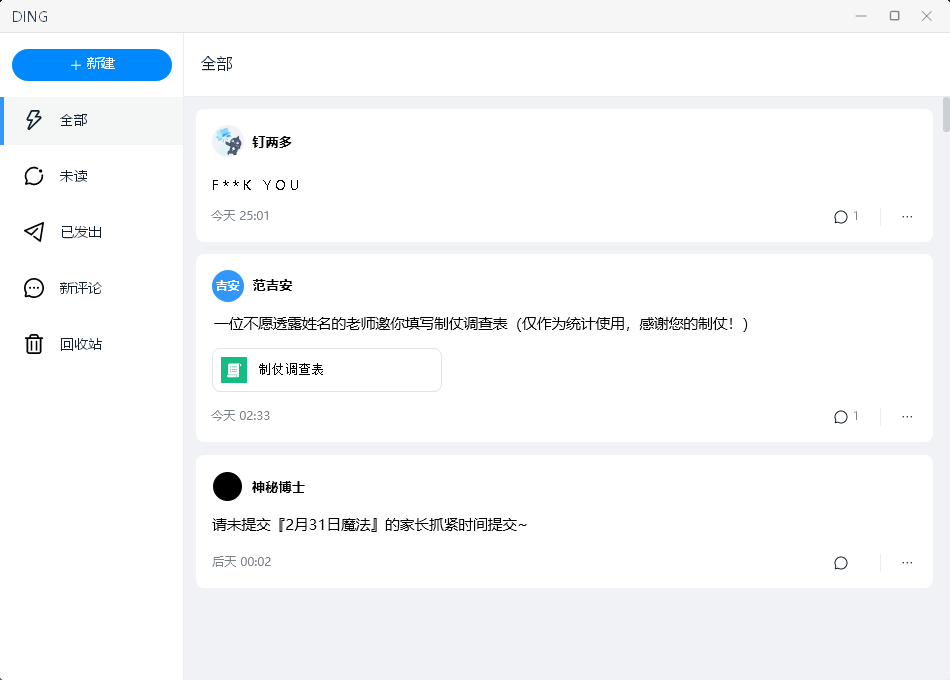
<style>
.page{position:relative;width:950px;height:680px;background:#ffffff}
.page>*{position:absolute;margin:0}
.t1{font:13.3px "MicrosoftYaHei-Bold";color:#000000}
.t2{font:13.3px "MicrosoftYaHei";color:#000000}
.t3{font:12px "MicrosoftYaHei";color:#7a8189}
.t4{font:12px "MicrosoftYaHei-Bold";color:#ffffff}
.t5{font:14.7px "MicrosoftYaHei";color:#000000}
.t6{font:13.3px "SimSun";color:#000000}
</style>
<div class="page">
<p class="t1" style="left:252px;top:136px;width:40px;height:12px">钉两多</p>
<p class="t2" style="left:213px;top:180px;width:85px;height:10px">F * * K   Y O U</p>
<p class="t3" style="left:211px;top:210px;width:57px;height:11px">今天 25:01</p>
<p class="t4" style="left:216px;top:280px;width:24px;height:11px">吉安</p>
<p class="t1" style="left:252px;top:279px;width:41px;height:12px">范吉安</p>
<p class="t5" style="left:214px;top:317px;width:534px;height:15px">一位不愿透露姓名的老师邀你填写制仗调查表（仅作为统计使用，感谢您的制仗！）</p>
<p class="t6" style="left:259px;top:363px;width:64px;height:12px">制仗调查表</p>
<p class="t3" style="left:211px;top:410px;width:59px;height:11px">今天 02:33</p>
<p class="t1" style="left:252px;top:481px;width:53px;height:12px">神秘博士</p>
<p class="t5" style="left:212px;top:518px;width:315px;height:14px">请未提交『2月31日魔法』的家长抓紧时间提交~</p>
<p class="t3" style="left:212px;top:556px;width:59px;height:11px">后天 00:02</p>
</div>
